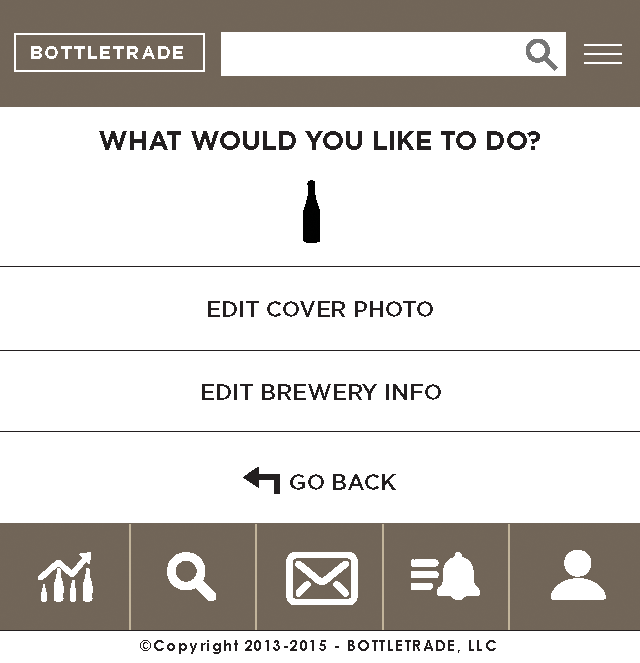
<style>
.page{position:relative;width:640px;height:663px;background:#ffffff}
.page>*{position:absolute;margin:0}
.t1{font:18px "Gotham-Bold";letter-spacing:0.099em;color:#ffffff}
.t2{font:26px "Gotham-Bold";color:#231f20}
.t3{font:22px "Gotham-Medium";color:#231f20}
.t4{font:15px "CenturyGothic-Bold";letter-spacing:0.099em;color:#231f20}
</style>
<div class="page">
<p class="t1" style="left:31px;top:46px;width:152px;height:13px">BOTTLETRADE</p>
<p class="t2" style="left:99px;top:131px;width:441px;height:19px">WHAT WOULD YOU LIKE TO DO?</p>
<p class="t3" style="left:208px;top:301px;width:225px;height:16px">EDIT COVER PHOTO</p>
<p class="t3" style="left:202px;top:384px;width:239px;height:16px">EDIT BREWERY INFO</p>
<p class="t3" style="left:290px;top:474px;width:106px;height:16px">GO BACK</p>
<p class="t4" style="left:140px;top:640px;width:356px;height:14px">©Copyright 2013-2015 - BOTTLETRADE, LLC</p>
</div>
